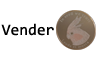
<style>
.page{position:relative;width:100px;height:60px;background:#ffffff}
.page>*{position:absolute;margin:0}
.t1{font:16px "Consolas";color:#000000}
</style>
<div class="page">
<p class="t1" style="left:1px;top:23px;width:53px;height:13px">Vender</p>
</div>
